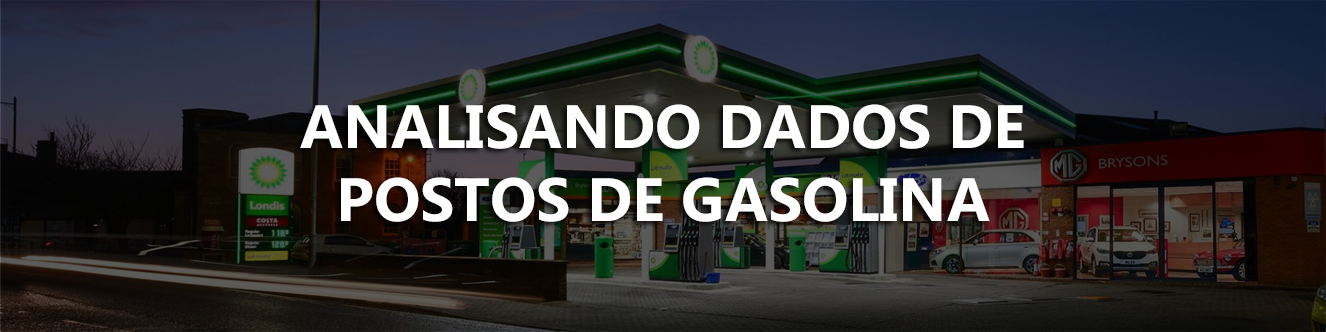
<style>
.page{position:relative;width:1326px;height:332px}
.page>*{position:absolute;margin:0}
.t1{font:61.1px "Gadugi-Bold";color:#ffffff}
</style>
<div class="page">
<p class="t1" style="left:300px;top:104px;width:724px;height:118px;text-align:center">ANALISANDO DADOS DE <br>POSTOS DE GASOLINA</p>
</div>
